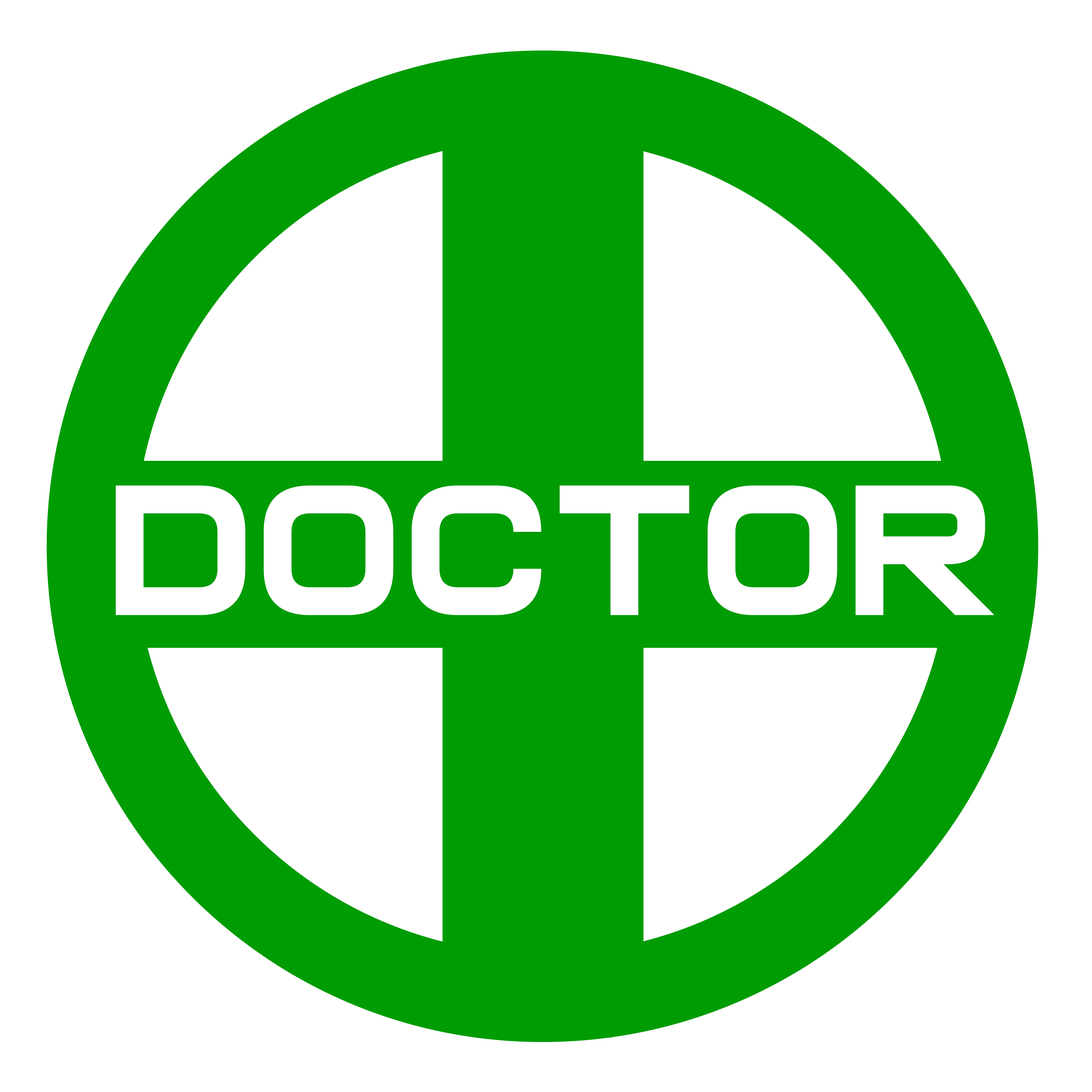
<style>
.page{position:relative;width:1092px;height:1092px;background:#ffffff}
.page>*{position:absolute;margin:0}
.t1{font:189.4px "CasanovaScotia";color:#ffffff}
</style>
<div class="page">
<p class="t1" style="left:116px;top:485px;width:879px;height:130px">DOCTOR</p>
</div>
